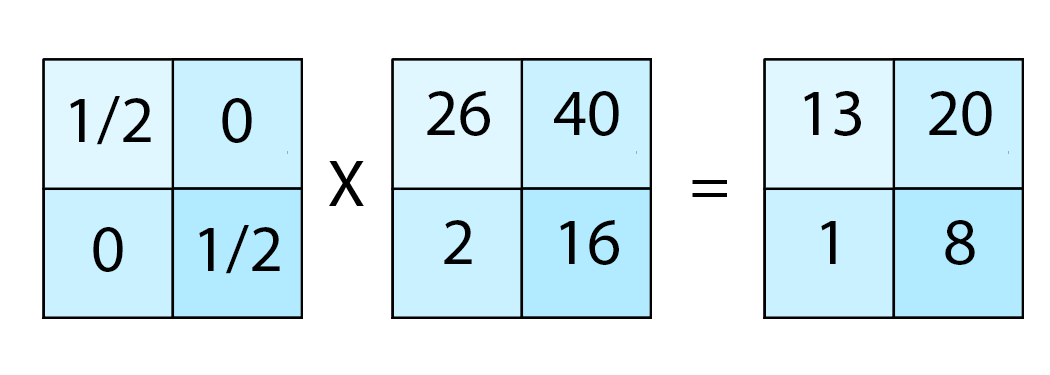
<style>
.page{position:relative;width:1050px;height:375px;background:#ffffff}
.page>*{position:absolute;margin:0}
.t1{font:66.7px "MyriadPro-Regular";color:#000000}
</style>
<div class="page">
<p class="t1" style="left:70px;top:96px;width:81px;height:49px">1/2</p>
<p class="t1" style="left:222px;top:98px;width:30px;height:45px">0</p>
<p class="t1" style="left:427px;top:91px;width:63px;height:45px">26</p>
<p class="t1" style="left:554px;top:91px;width:65px;height:45px">40</p>
<p class="t1" style="left:804px;top:91px;width:57px;height:45px">13</p>
<p class="t1" style="left:929px;top:91px;width:63px;height:45px">20</p>
<p class="t1" style="left:329px;top:161px;width:35px;height:45px">X</p>
<p class="t1" style="left:692px;top:180px;width:35px;height:17px">=</p>
<p class="t1" style="left:444px;top:220px;width:28px;height:44px">2</p>
<p class="t1" style="left:560px;top:220px;width:59px;height:45px">16</p>
<p class="t1" style="left:821px;top:221px;width:15px;height:43px">1</p>
<p class="t1" style="left:945px;top:220px;width:30px;height:45px">8</p>
<p class="t1" style="left:93px;top:227px;width:30px;height:45px">0</p>
<p class="t1" style="left:199px;top:225px;width:81px;height:49px">1/2</p>
</div>
